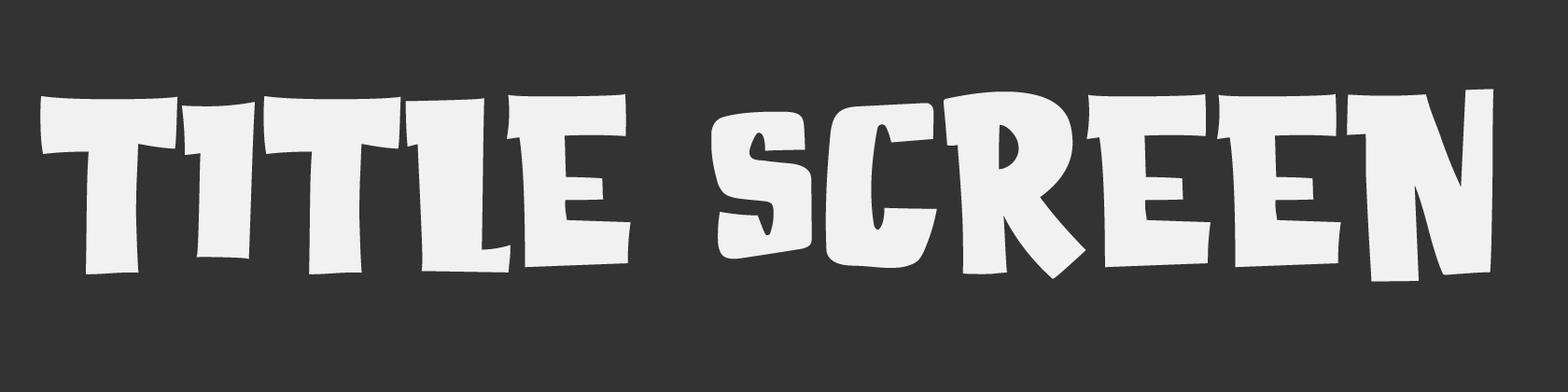
<style>
.page{position:relative;width:1568px;height:392px;background:#333333}
.page>*{position:absolute;margin:0}
.t1{font:242.7px "AttackOfMonsterRegular";color:#f1f1f1}
</style>
<div class="page">
<p class="t1" style="left:40px;top:89px;width:1454px;height:193px">TITLE SCREEN</p>
</div>
